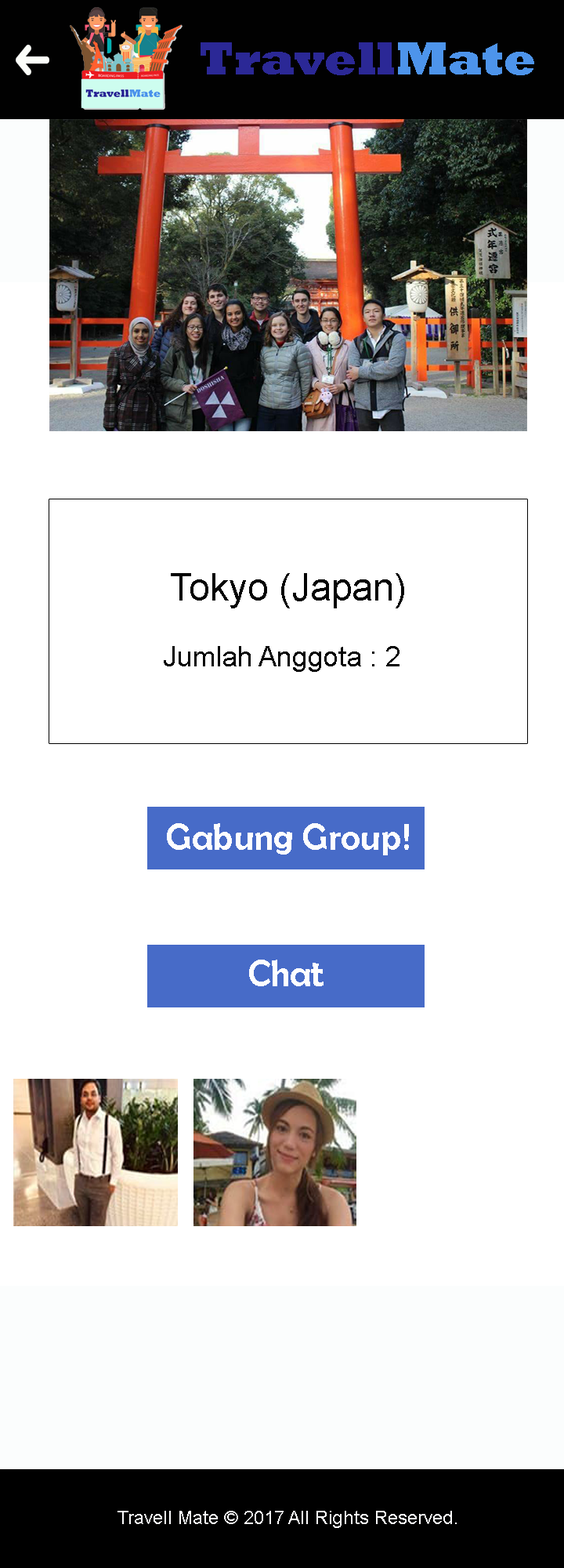
<style>
.page{position:relative;width:564px;height:1568px;background:#ffffff}
.page>*{position:absolute;margin:0}
.t1{font:47px "Rockwell-ExtraBold";color:#2b2896}
.t2{font:47px "Rockwell-ExtraBold";color:#4d94eb}
.t3{font:37.6px "ArialMT";color:#050505}
.t4{font:28.2px "ArialMT";color:#050505}
.t5{font:37.6px "BerlinSansFB-Reg";color:#fdfdfe}
.t6{font:18.8px "ArialMT";color:#fdfdfe}
</style>
<div class="page">
<p class="t1" style="left:201px;top:42px;width:334px;height:33px">Travell<span class="t2">Mate</span></p>
<p class="t3" style="left:171px;top:573px;width:234px;height:35px">Tokyo (Japan)</p>
<p class="t4" style="left:164px;top:646px;width:236px;height:26px">Jumlah Anggota : 2</p>
<p class="t5" style="left:167px;top:823px;width:242px;height:32px">Gabung Group!</p>
<p class="t5" style="left:249px;top:960px;width:75px;height:26px">Chat</p>
<p class="t6" style="left:118px;top:1511px;width:339px;height:17px">Travell Mate © 2017 All Rights Reserved.</p>
</div>
